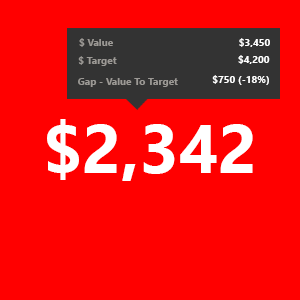
<style>
.page{position:relative;width:300px;height:300px;background:#ff0000}
.page>*{position:absolute;margin:0}
.t1{font:10px "SegoeUI-Bold";color:#9c9995}
.t2{font:10px "SegoeUI-Bold";color:#ffffff}
.t3{font:68px "SegoeUI-Bold";color:#ffffff}
</style>
<div class="page">
<p class="t1" style="left:79px;top:38px;width:34px;height:9px">$ Value</p>
<p class="t2" style="left:239px;top:38px;width:31px;height:9px">$3,450</p>
<p class="t1" style="left:78px;top:56px;width:39px;height:10px">$ Target</p>
<p class="t2" style="left:238px;top:55px;width:32px;height:9px">$4,200</p>
<p class="t1" style="left:78px;top:78px;width:100px;height:9px">Gap - Value To Target</p>
<p class="t2" style="left:212px;top:75px;width:57px;height:10px">$750 (-18%)</p>
<p class="t3" style="left:47px;top:119px;width:206px;height:62px">$2,342</p>
</div>
